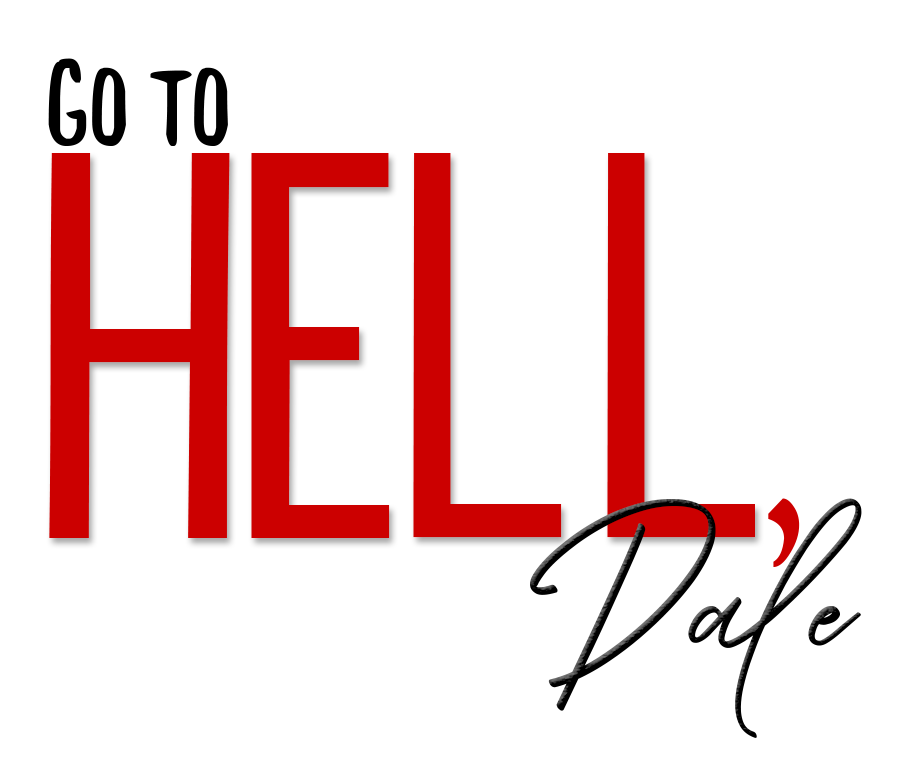
<style>
.page{position:relative;width:897px;height:774px;background:#ffffff}
.page>*{position:absolute;margin:0}
.t1{font:125px "LittleBoss";color:#000000}
.t2{font:562.5px "PrincellaSans";color:#cc0000;scale:1.11 1}
.t3{font:300px "Ranuella"}
.t4{font:250px "LittleBoss";color:#cc0000}
</style>
<div class="page">
<p class="t1" style="left:48px;top:58px;width:180px;height:88px">Go to</p>
<p class="t2" style="left:49px;top:153px;width:706px;height:385px">Hell</p>
<p class="t3" style="left:530px;top:498px;width:332px;height:240px">Dale</p>
<p class="t4" style="left:768px;top:498px;width:32px;height:69px">,</p>
</div>
